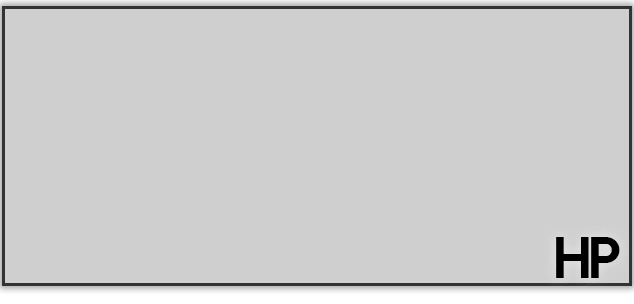
<style>
.page{position:relative;width:634px;height:304px;background:#cfcfcf}
.page>*{position:absolute;margin:0}
.t1{font:57px "ProductSans-Bold";letter-spacing:-0.1em;color:#000000}
</style>
<div class="page">
<p class="t1" style="left:556px;top:237px;width:64px;height:41px">HP</p>
</div>
